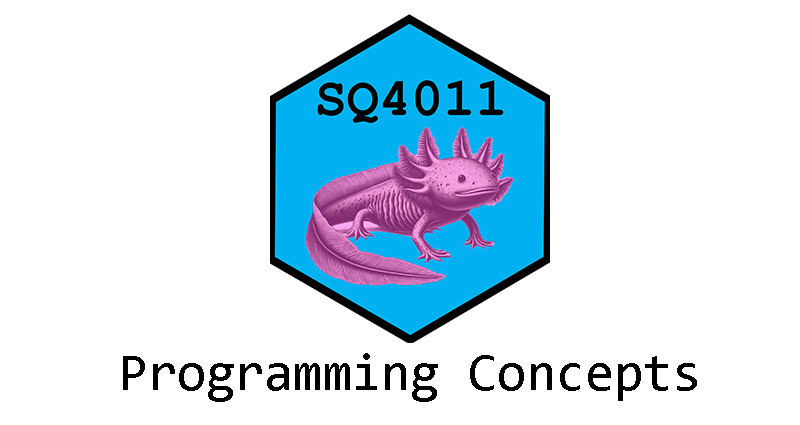
<style>
.page{position:relative;width:800px;height:425px;background:#ffffff}
.page>*{position:absolute;margin:0}
.t1{font:53px "Consolas";color:#000000}
</style>
<div class="page">
<p class="t1" style="left:123px;top:353px;width:574px;height:49px">Programming Concepts</p>
</div>
